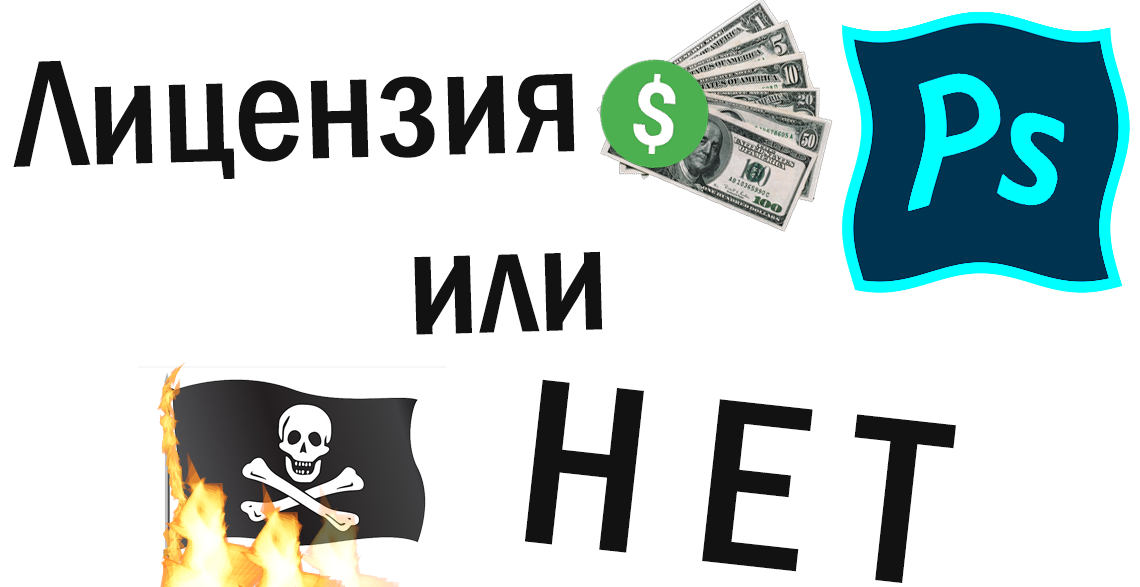
<style>
.page{position:relative;width:1140px;height:587px;background:#ffffff}
.page>*{position:absolute;margin:0}
.t1{font:156.8px "FranklinGothic-MediumCond";color:#121212}
.t2{font:243.7px "FranklinGothic-MediumCond";color:#121212}
</style>
<div class="page">
<p class="t1" style="left:13px;top:60px;width:562px;height:119px;rotate:-2deg">Лицензия</p>
<p class="t1" style="left:414px;top:251px;width:189px;height:84px;rotate:-2deg">или</p>
<p class="t2" style="left:525px;top:379px;width:431px;height:204px;rotate:6deg">Н Е Т</p>
</div>
